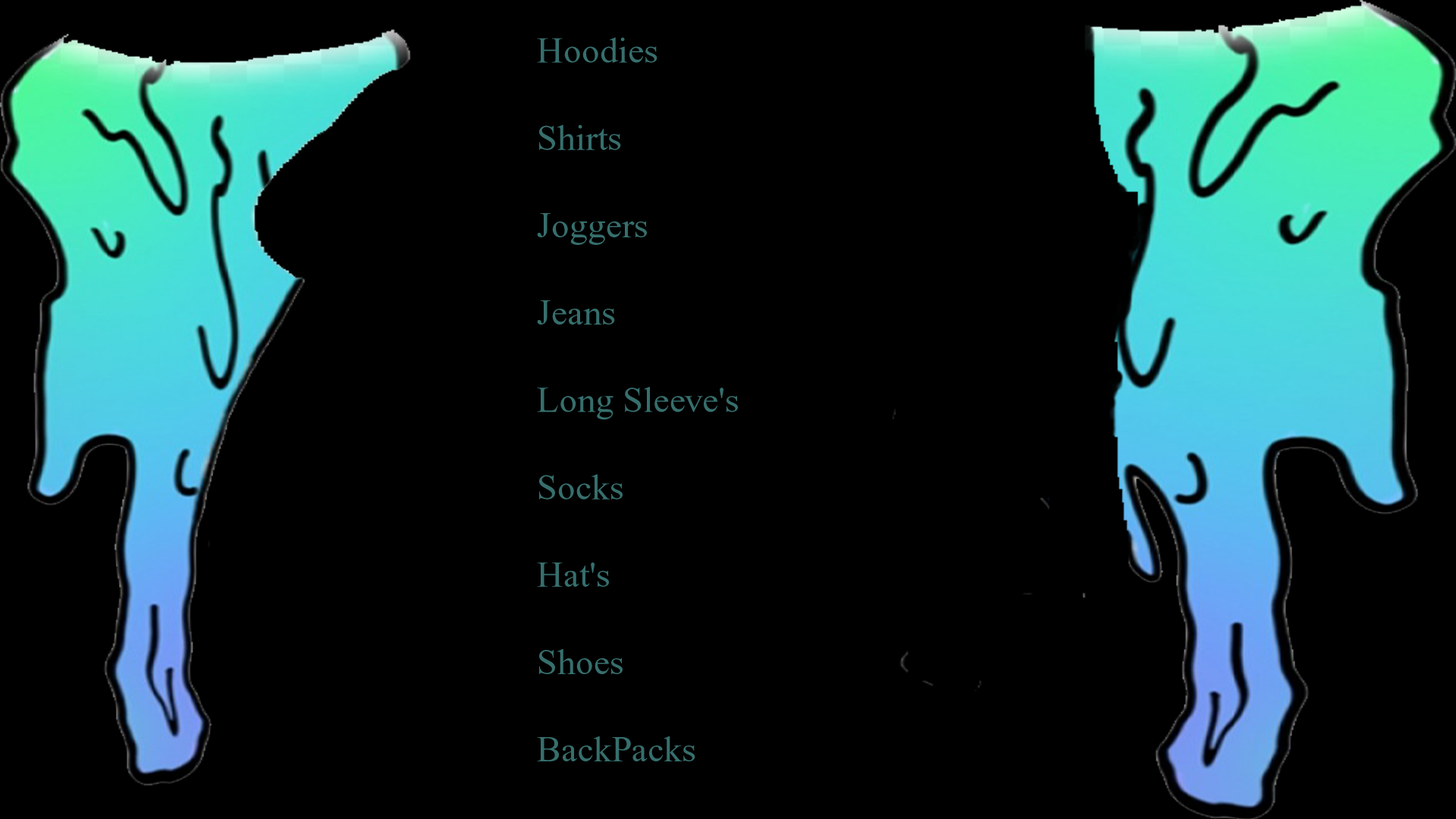
<style>
.page{position:relative;width:1456px;height:819px;background:#000000}
.page>*{position:absolute;margin:0}
.t1{font:36.4px "TimesNewRomanPSMT";color:#366f6d}
</style>
<div class="page">
<p class="t1" style="left:537px;top:37px;width:201px;height:724px">Hoodies<br><br>Shirts<br><br>Joggers<br><br>Jeans<br><br>Long Sleeve's<br><br>Socks<br><br>Hat's<br><br>Shoes<br><br>BackPacks</p>
</div>
